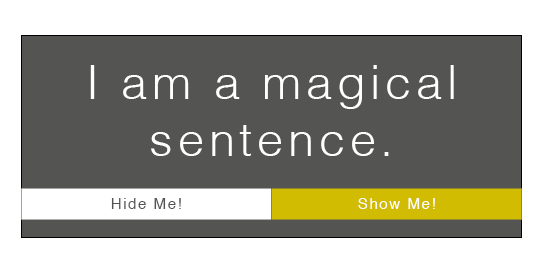
<style>
.page{position:relative;width:550px;height:279px;background:#545452}
.page>*{position:absolute;margin:0}
.t1{font:47px "Helvetica-Light";letter-spacing:0.1em;color:#ffffff}
.t2{font:15px "Helvetica";letter-spacing:0.1em;color:#535353}
.t3{font:15px "Helvetica";letter-spacing:0.1em;color:#ffffff}
</style>
<div class="page">
<p class="t1" style="left:90px;top:65px;width:364px;height:91px;text-align:center">I am a magical sentence.</p>
<p class="t2" style="left:111px;top:198px;width:70px;height:11px">Hide Me!</p>
<p class="t3" style="left:358px;top:198px;width:77px;height:11px">Show Me!</p>
</div>
